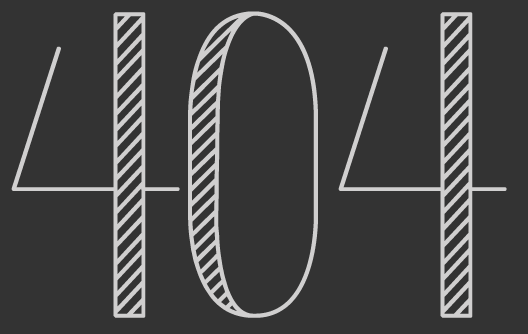
<style>
.page{position:relative;width:528px;height:334px;background:#333333}
.page>*{position:absolute;margin:0}
.t1{font:333.6px "Mayonaise-Condensed";letter-spacing:-0.01em;color:#d0cfcf}
</style>
<div class="page">
<p class="t1" style="left:11px;top:11px;width:496px;height:307px">404</p>
</div>
